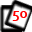
<style>
.page{position:relative;width:32px;height:32px;background:#ffffff}
.page>*{position:absolute;margin:0}
.t1{font:15.3px "Corbel-Bold";color:#ff0000}
</style>
<div class="page">
<p class="t1" style="left:12px;top:11px;width:16px;height:10px">50</p>
</div>
